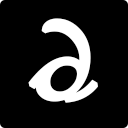
<style>
.page{position:relative;width:128px;height:128px;background:#000000}
.page>*{position:absolute;margin:0}
.t1{font:168px "FrenchScriptMT";color:#ffffff;font-weight:bold;scale:1.2 1}
</style>
<div class="page">
<p class="t1" style="left:28px;top:18px;width:70px;height:85px">d</p>
</div>
